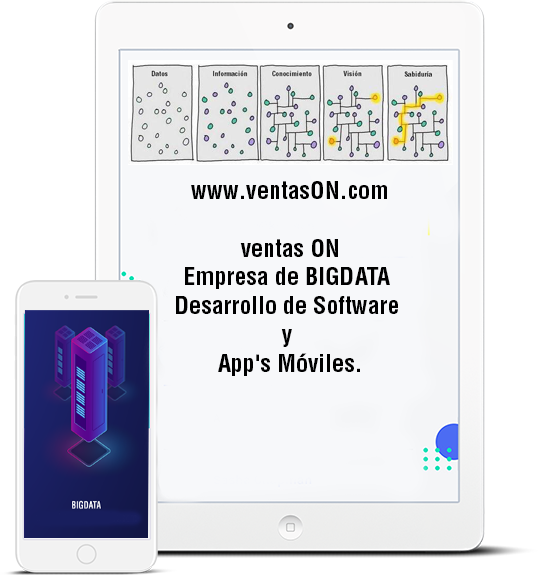
<style>
.page{position:relative;width:538px;height:575px;background:#f7f8fa}
.page>*{position:absolute;margin:0}
.t1{font:24px "Helvetica-Condensed-Bold";color:#000000}
</style>
<div class="page">
<p class="t1" style="left:176px;top:181px;width:222px;height:195px;text-align:center">www.ventasON.com<br><br>ventas ON<br>Empresa de BIGDATA <br>Desarrollo de Software <br>y <br>App's Móviles.</p>
</div>
